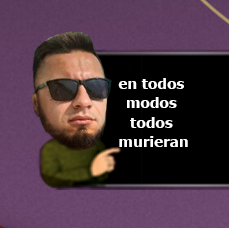
<style>
.page{position:relative;width:229px;height:228px;background:#000000}
.page>*{position:absolute;margin:0}
.t1{font:14px "Tahoma-Bold";color:#fefefe;scale:1.09 1}
</style>
<div class="page">
<p class="t1" style="left:118px;top:78px;width:70px;height:69px;text-align:center">en todos <br>modos <br>todos <br>murieran</p>
</div>
